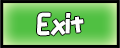
<style>
.page{position:relative;width:120px;height:48px}
.page>*{position:absolute;margin:0}
.t1{font:32px "Animated";color:#ffffff}
</style>
<div class="page">
<p class="t1" style="left:37px;top:12px;width:47px;height:24px">Exit</p>
</div>
